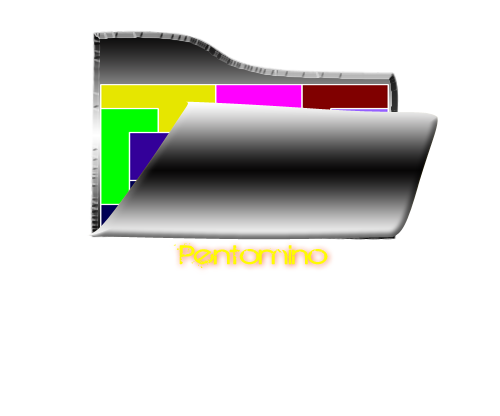
<style>
.page{position:relative;width:500px;height:416px;background:#ffffff}
.page>*{position:absolute;margin:0}
.t1{font:28.8px "BIRTHOFAHERO";color:#fffc00;scale:1.33 1}
</style>
<div class="page">
<p class="t1" style="left:173px;top:243px;width:155px;height:25px">Pentomino</p>
</div>
